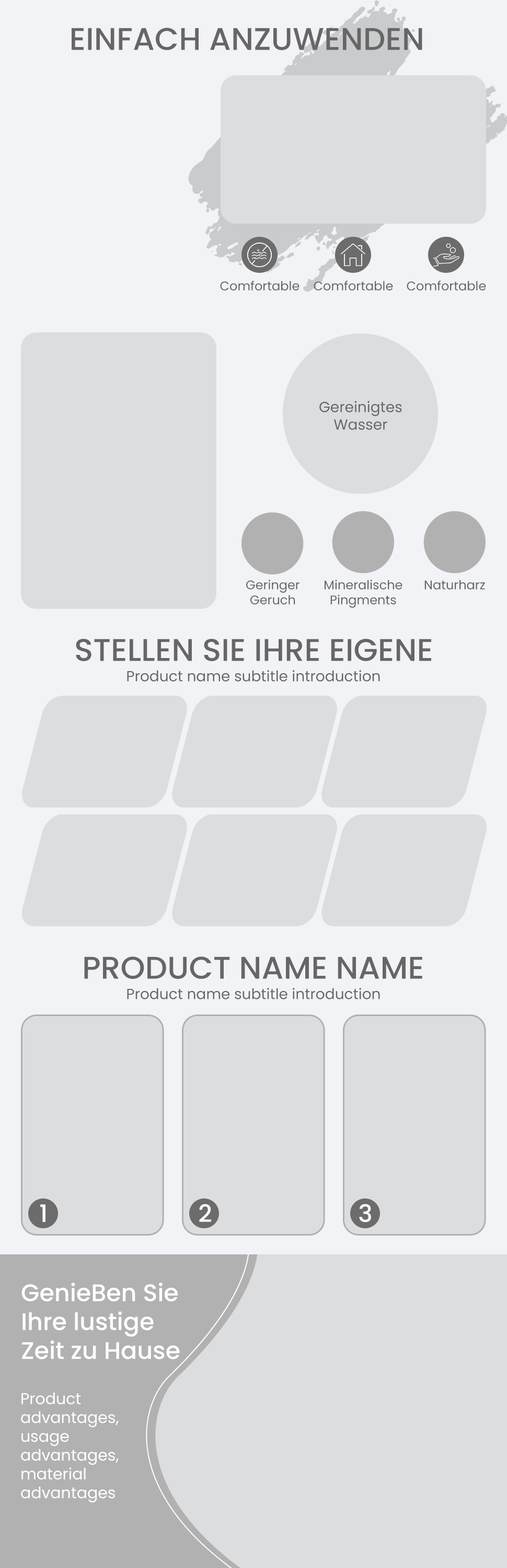
<style>
.page{position:relative;width:507px;height:1568px;background:#dcdddf}
.page>*{position:absolute;margin:0}
.t1{font:31.4px "Poppins-Medium";color:#666666;text-transform:uppercase}
.t2{font:12.5px "Poppins-Regular";color:#666666}
.t3{font:14.6px "Poppins-Regular";color:#666666}
.t4{font:31.4px "Poppins-Medium";color:#666666}
.t5{font:24px "Poppins-Medium";color:#ffffff}
.t6{font:15.7px "Poppins-Regular";color:#ffffff}
</style>
<div class="page">
<p class="t1" style="left:72px;top:28px;width:350px;height:22px">Einfach Anzuwenden</p>
<p class="t2" style="left:220px;top:281px;width:79px;height:10px">Comfortable</p>
<p class="t2" style="left:314px;top:281px;width:79px;height:10px">Comfortable</p>
<p class="t2" style="left:407px;top:281px;width:79px;height:10px">Comfortable</p>
<p class="t3" style="left:319px;top:401px;width:83px;height:29px;text-align:center">Gereinigtes<br>Wasser</p>
<p class="t2" style="left:246px;top:580px;width:53px;height:25px;text-align:center">Geringer<br>Geruch</p>
<p class="t2" style="left:325px;top:580px;width:77px;height:28px;text-align:center">Mineralische<br>Pingments</p>
<p class="t2" style="left:424px;top:580px;width:61px;height:10px">Naturharz</p>
<p class="t1" style="left:76px;top:639px;width:355px;height:22px">Stellen Sie Ihre Eigene</p>
<p class="t3" style="left:127px;top:670px;width:253px;height:12px">Product name subtitle introduction</p>
<p class="t4" style="left:84px;top:956px;width:338px;height:23px">PRODUCT NAME NAME</p>
<p class="t3" style="left:127px;top:988px;width:253px;height:11px">Product name subtitle introduction</p>
<p class="t5" style="left:40px;top:1204px;width:5px;height:18px">1</p>
<p class="t5" style="left:199px;top:1204px;width:12px;height:18px">2</p>
<p class="t5" style="left:359px;top:1204px;width:12px;height:19px">3</p>
<p class="t5" style="left:21px;top:1283px;width:159px;height:76px">GenieBen Sie<br>Ihre lustige<br>Zeit zu Hause</p>
<p class="t6" style="left:21px;top:1392px;width:98px;height:111px">Product<br>advantages,<br>usage<br>advantages,<br>material<br>advantages</p>
</div>
